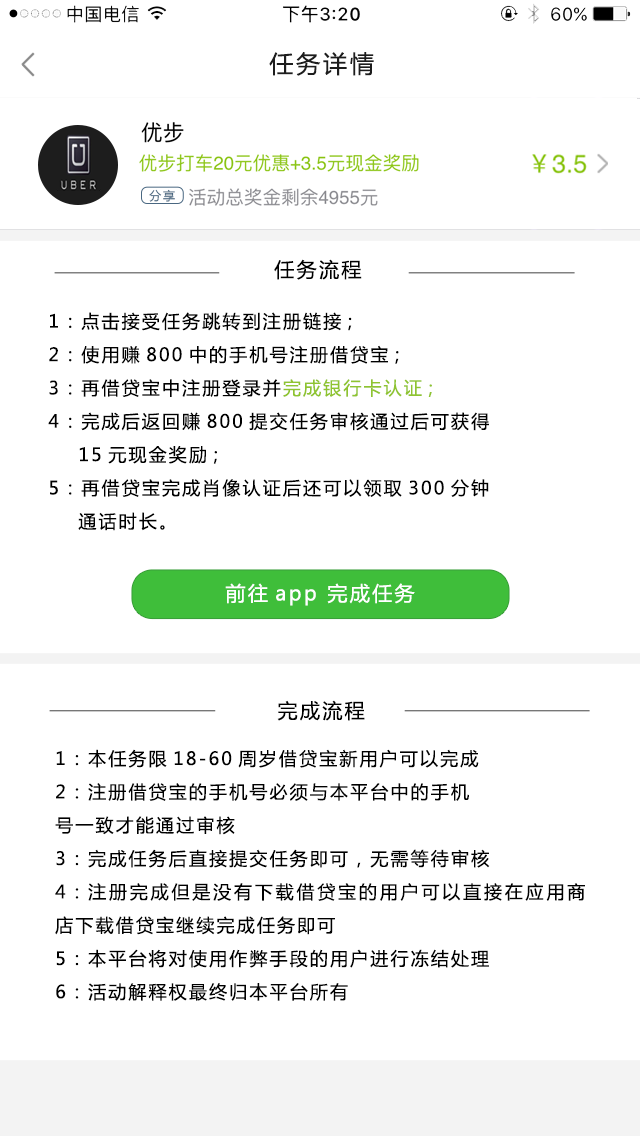
<style>
.page{position:relative;width:640px;height:1136px;background:#ffffff}
.page>*{position:absolute;margin:0}
.t1{font:24px "MicrosoftYaHei";letter-spacing:0.12em;color:#1d1d1d;font-variant:small-caps}
.t2{font:11.9px "MicrosoftYaHei";letter-spacing:0.15em;color:#496781}
.t3{font:20px "MicrosoftYaHei";letter-spacing:0.12em;color:#000000}
.t4{font:18px/33.3px "MicrosoftYaHei";letter-spacing:0.12em;color:#000000}
.t5{font:18px/33.3px "MicrosoftYaHei";letter-spacing:0.12em;color:#8fc430}
.t6{font:20px "MicrosoftYaHei";letter-spacing:0.12em;color:#ffffff}
</style>
<div class="page">
<p class="t1" style="left:269px;top:52px;width:105px;height:24px">任务详情</p>
<p class="t2" style="left:149px;top:189px;width:26px;height:13px">分享</p>
<p class="t3" style="left:274px;top:259px;width:88px;height:21px">任务流程</p>
<p class="t4" style="left:48px;top:312px;width:441px;height:219px">1：点击接受任务跳转到注册链接;<br>2：使用赚800中的手机号注册借贷宝;<br>3：再借贷宝中注册登录并<span class="t5">完成银行卡认证;<br></span>4：完成后返回赚800提交任务审核通过后可获得     <br>    15元现金奖励;<br>5：再借贷宝完成肖像认证后还可以领取300分钟<br>    通话时长。</p>
<p class="t6" style="left:225px;top:583px;width:190px;height:23px">前往app 完成任务</p>
<p class="t3" style="left:277px;top:700px;width:88px;height:21px">完成流程</p>
<p class="t4" style="left:55px;top:749px;width:530px;height:252px;text-align:justify">1：本任务限18-60周岁借贷宝新用户可以完成<br>2：注册借贷宝的手机号必须与本平台中的手机<br>号一致才能通过审核<br>3：完成任务后直接提交任务即可，无需等待审核<br>4：注册完成但是没有下载借贷宝的用户可以直接在应用商店下载借贷宝继续完成任务即可<br>5：本平台将对使用作弊手段的用户进行冻结处理<br>6：活动解释权最终归本平台所有</p>
</div>
